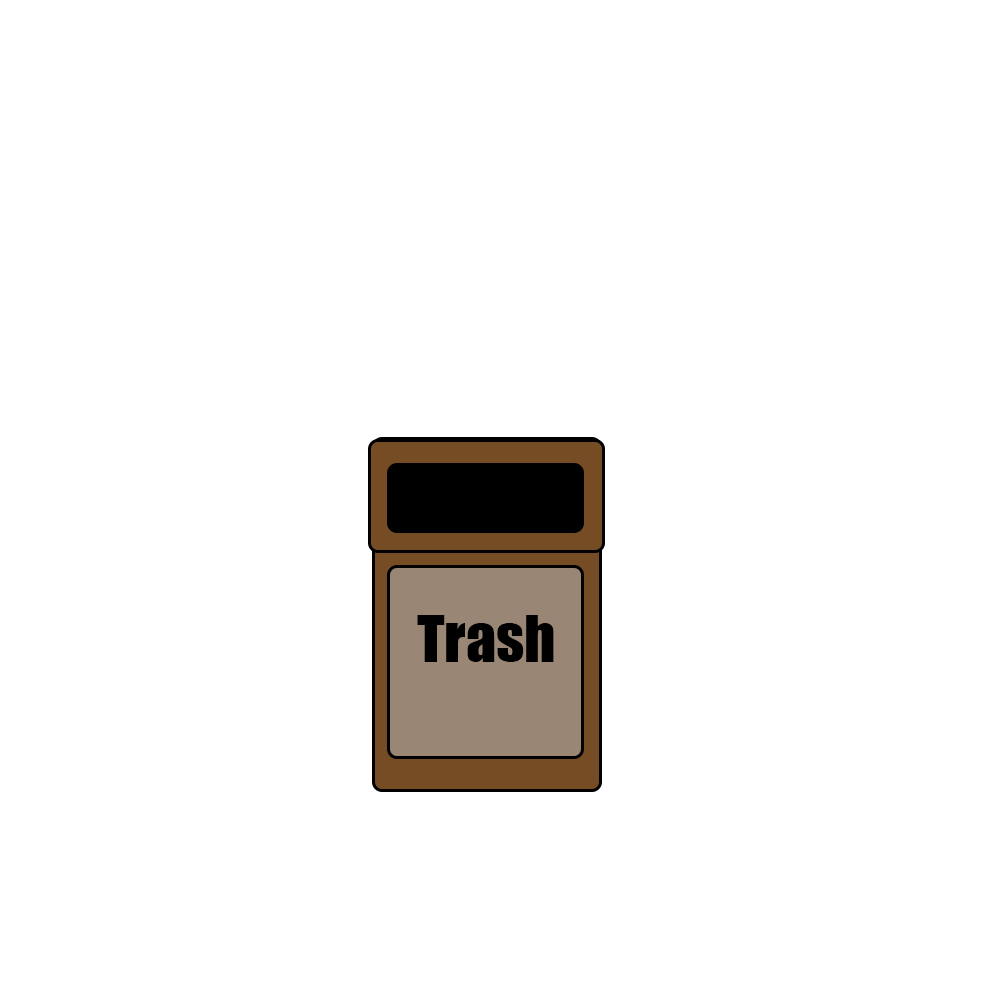
<style>
.page{position:relative;width:1000px;height:1000px;background:#ffffff}
.page>*{position:absolute;margin:0}
.t1{font:60px "Impact";color:#000000}
</style>
<div class="page">
<p class="t1" style="left:417px;top:615px;width:137px;height:47px">Trash</p>
</div>
